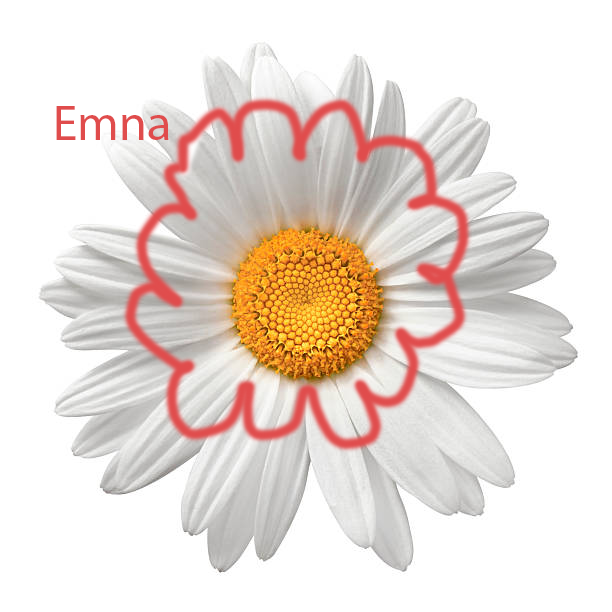
<style>
.page{position:relative;width:612px;height:612px;background:#ffffff}
.page>*{position:absolute;margin:0}
.t1{font:50px "MyriadPro-Regular";color:#e04c4c}
</style>
<div class="page">
<p class="t1" style="left:56px;top:106px;width:113px;height:34px">Emna</p>
</div>
